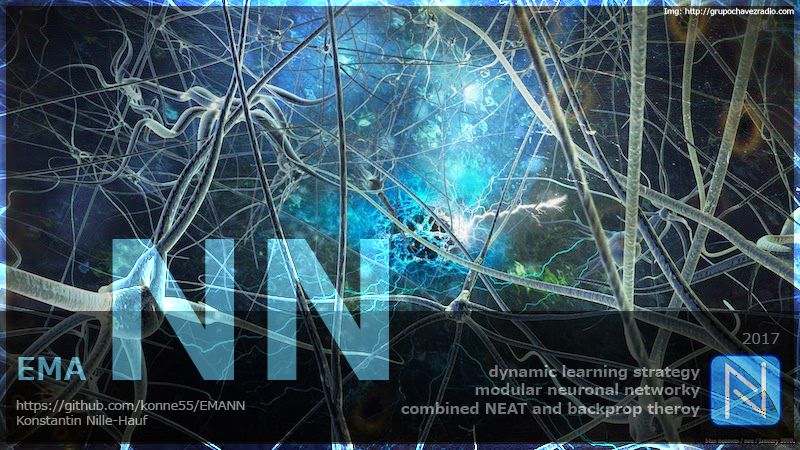
<style>
.page{position:relative;width:800px;height:450px}
.page>*{position:absolute;margin:0}
.t1{font:7.6px "Meiryo";color:#ffffff}
.t2{font:30.5px "Meiryo-Bold"}
.t3{font:190.5px "Meiryo-Bold"}
.t4{font:15.2px "Meiryo";color:#6c6c6c}
.t5{font:15.2px "Meiryo-Bold";color:#6c6c6c}
.t6{font:12.7px "Meiryo";color:#858585}
</style>
<div class="page">
<p class="t1" style="left:664px;top:7px;width:130px;height:9px">Img: http://grupochavezradio.com</p>
<p class="t2" style="left:18px;top:239px;width:371px;height:141px">EMA <span class="t3">NN</span></p>
<p class="t4" style="left:743px;top:333px;width:37px;height:11px">2017</p>
<p class="t5" style="left:401px;top:365px;width:299px;height:52px;text-align:right">dynamic learning strategy<br>modular neuronal networky<br>combined NEAT and backprop theroy</p>
<p class="t6" style="left:16px;top:400px;width:229px;height:25px">https://github.com/konne55/EMANN<br>Konstantin Nille-Hauf</p>
</div>
